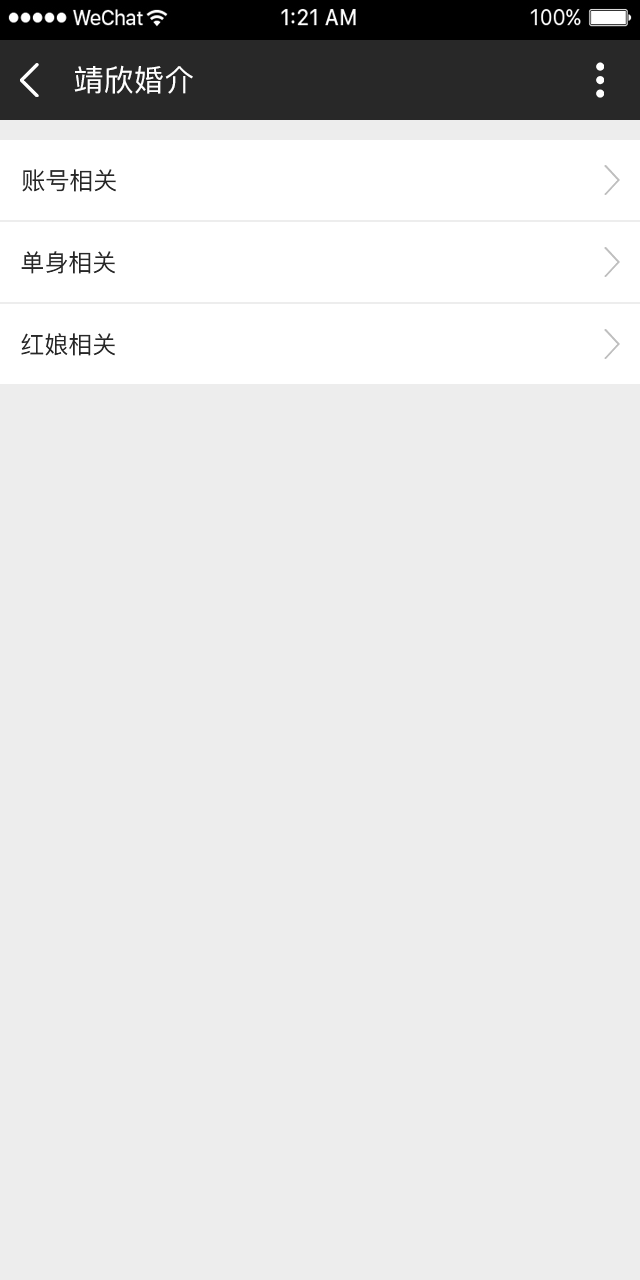
<style>
.page{position:relative;width:640px;height:1280px;background:#ededed}
.page>*{position:absolute;margin:0}
.t1{font:30px "PingFang-SC-Medium";letter-spacing:0.01em;color:#ffffff;text-transform:uppercase}
.t2{font:24px "PingFang-SC-Medium";color:#282828;text-transform:uppercase}
</style>
<div class="page">
<p class="t1" style="left:74px;top:65px;width:119px;height:29px">靖欣婚介</p>
<p class="t2" style="left:22px;top:169px;width:94px;height:23px">账号相关</p>
<p class="t2" style="left:21px;top:251px;width:94px;height:23px">单身相关</p>
<p class="t2" style="left:21px;top:333px;width:94px;height:23px">红娘相关</p>
</div>
